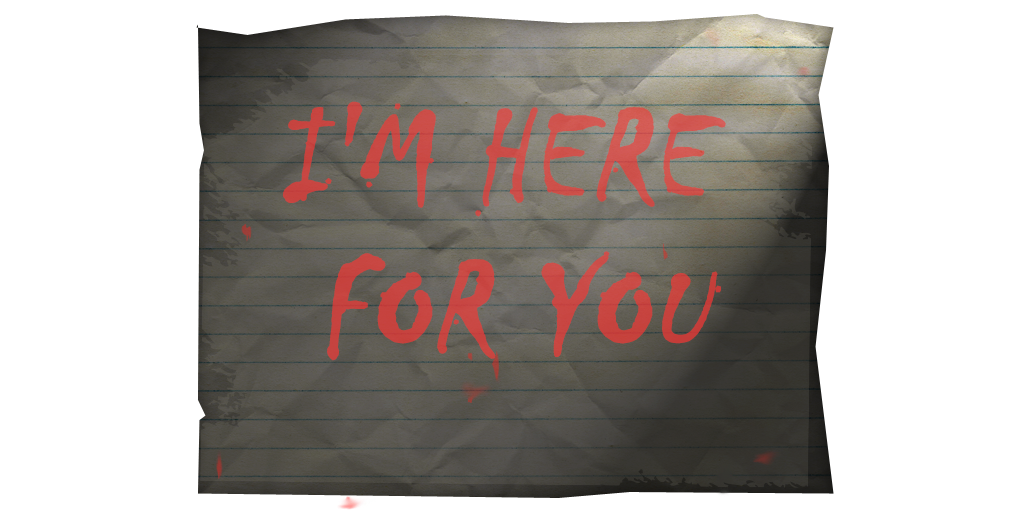
<style>
.page{position:relative;width:1024px;height:512px;background:#ffffff}
.page>*{position:absolute;margin:0}
.t1{font:130.7px/152px "Chiller-Regular";color:#ca4844;text-transform:uppercase;font-weight:bold;font-style:italic}
</style>
<div class="page">
<p class="t1" style="left:282px;top:101px;width:444px;height:260px;text-align:center">I'm here <br>for you</p>
</div>
